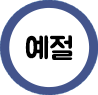
<style>
.page{position:relative;width:98px;height:95px;background:#ffffff}
.page>*{position:absolute;margin:0}
.t1{font:30px "BMJUA";color:#000000}
</style>
<div class="page">
<p class="t1" style="left:25px;top:35px;width:48px;height:25px">예절</p>
</div>
